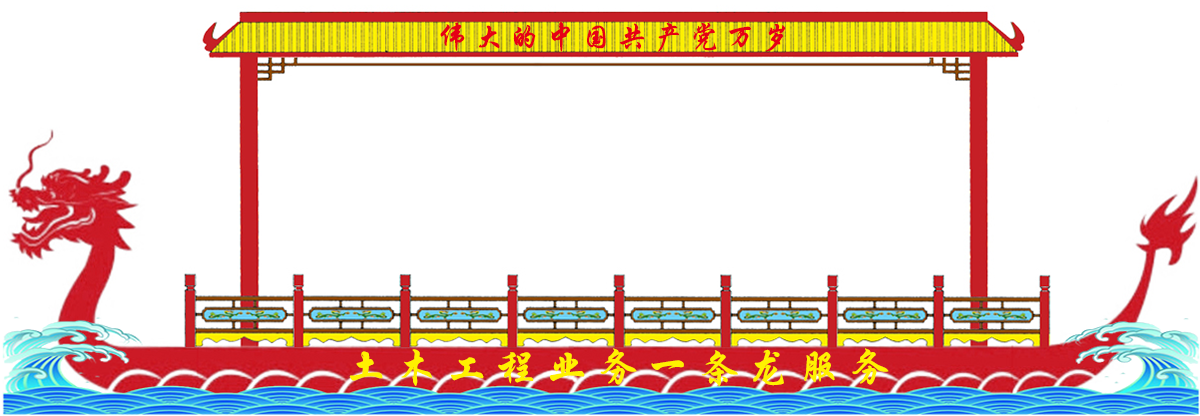
<style>
.page{position:relative;width:1200px;height:416px;background:#ffffff}
.page>*{position:absolute;margin:0}
.t1{font:30px "STXingkai-SC-Bold";letter-spacing:0.199em;color:#e60016}
.t2{font:42px "STXingkai-SC-Bold";letter-spacing:0.199em;color:#fff100}
</style>
<div class="page">
<p class="t1" style="left:440px;top:21px;width:346px;height:31px">伟大的中国共产党万岁</p>
<p class="t2" style="left:349px;top:348px;width:540px;height:38px">土木工程业务一条龙服务</p>
</div>
